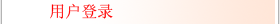
<style>
.page{position:relative;width:280px;height:24px;background:#ffffff}
.page>*{position:absolute;margin:0}
.t1{font:16px "SimSun";color:#ff0000}
</style>
<div class="page">
<p class="t1" style="left:50px;top:3px;width:63px;height:16px">用户登录</p>
</div>
